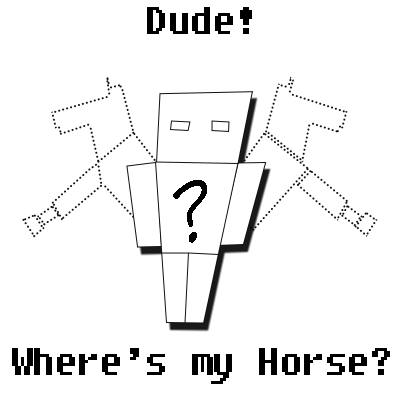
<style>
.page{position:relative;width:400px;height:400px;background:#ffffff}
.page>*{position:absolute;margin:0}
.t1{font:36px "Fixedsys";color:#000000}
.t2{font:85px "InkFree";color:#000000}
</style>
<div class="page">
<p class="t1" style="left:147px;top:7px;width:105px;height:27px">Dude!</p>
<p class="t2" style="left:173px;top:180px;width:34px;height:63px">?</p>
<p class="t1" style="left:12px;top:348px;width:378px;height:36px">Where’s my Horse?</p>
</div>
